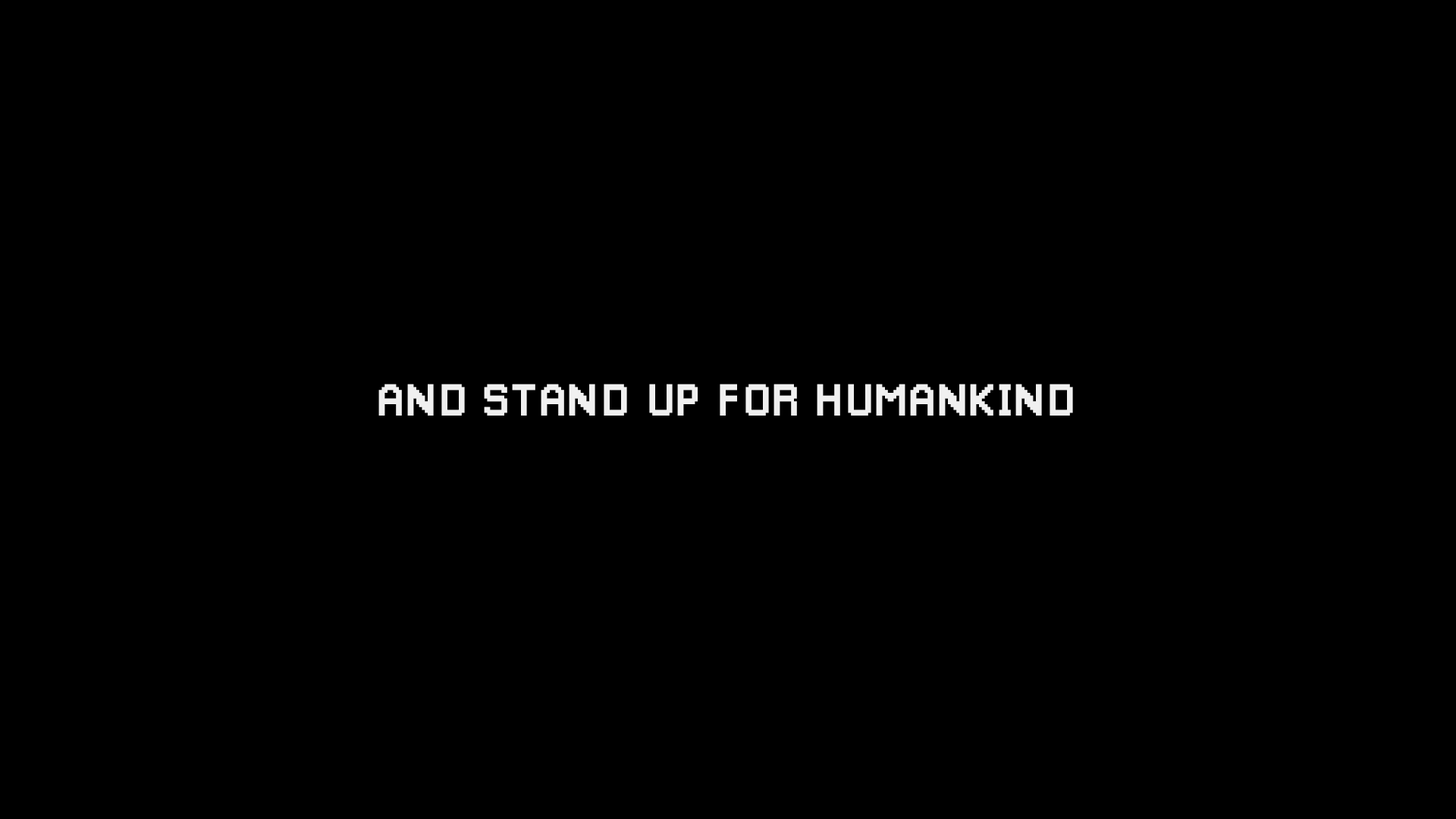
<style>
.page{position:relative;width:1456px;height:819px;background:#000000}
.page>*{position:absolute;margin:0}
.t1{font:45.5px "Pixellari";color:#f0f0f0}
</style>
<div class="page">
<p class="t1" style="left:378px;top:384px;width:695px;height:32px">AND STAND UP FOR HUMANKIND</p>
</div>
